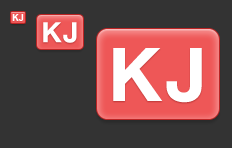
<style>
.page{position:relative;width:232px;height:148px;background:#333333}
.page>*{position:absolute;margin:0}
.t1{font:9px "Arial-BoldMT";color:#ffffff}
.t2{font:28px "HelveticaNeue-Bold";color:#ffffff}
.t3{font:74.3px "HelveticaNeue-Bold";color:#ffffff}
</style>
<div class="page">
<p class="t1" style="left:12px;top:14px;width:12px;height:7px">KJ</p>
<p class="t2" style="left:43px;top:22px;width:34px;height:21px">KJ</p>
<p class="t3" style="left:113px;top:48px;width:89px;height:55px">KJ</p>
</div>
